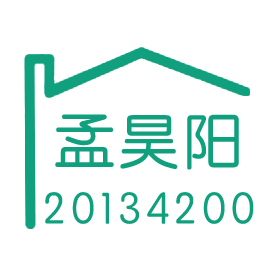
<style>
.page{position:relative;width:277px;height:277px;background:#ffffff}
.page>*{position:absolute;margin:0}
.t1{font:60px "STYuanti-SC-Regular";letter-spacing:0.075em;color:#10a07d}
.t2{font:45px "STYuanti-SC-Regular";letter-spacing:0.075em;color:#10a07d}
</style>
<div class="page">
<p class="t1" style="left:55px;top:114px;width:184px;height:56px">孟昊阳</p>
<p class="t2" style="left:45px;top:192px;width:209px;height:32px">20134200</p>
</div>
